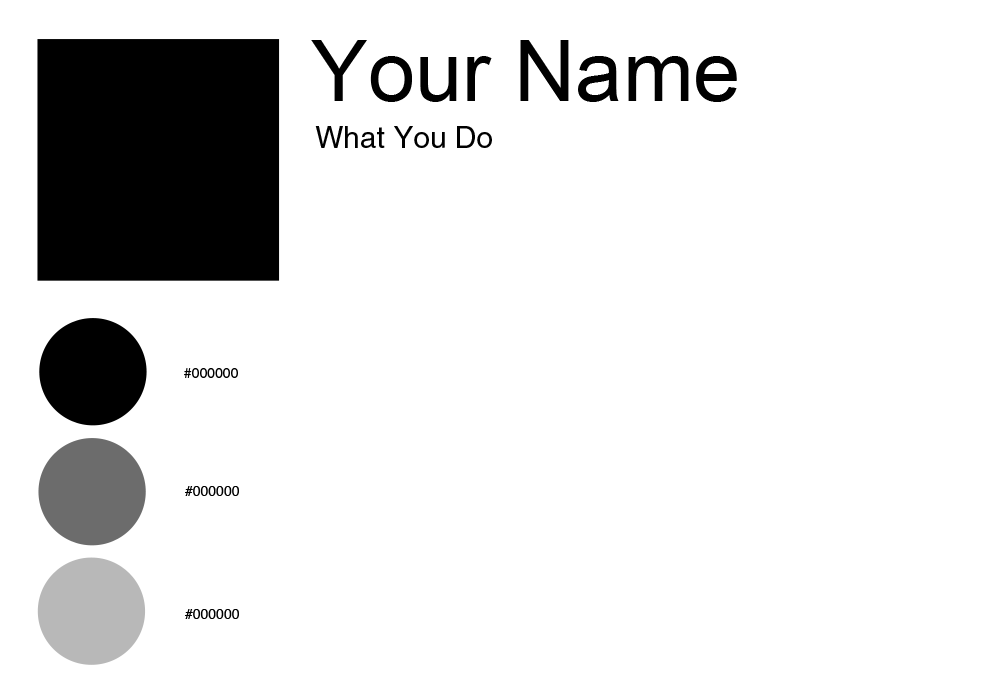
<style>
.page{position:relative;width:1000px;height:700px;background:#ffffff}
.page>*{position:absolute;margin:0}
.t1{font:85px "ArialMT";color:#000000}
.t2{font:30px "Helvetica";color:#000000}
.t3{font:14px "Helvetica";color:#000000}
</style>
<div class="page">
<p class="t1" style="left:311px;top:40px;width:426px;height:62px">Your Name</p>
<p class="t2" style="left:315px;top:126px;width:177px;height:22px">What You Do</p>
<p class="t3" style="left:184px;top:368px;width:54px;height:10px">#000000</p>
<p class="t3" style="left:185px;top:486px;width:54px;height:10px">#000000</p>
<p class="t3" style="left:185px;top:609px;width:54px;height:10px">#000000</p>
</div>
